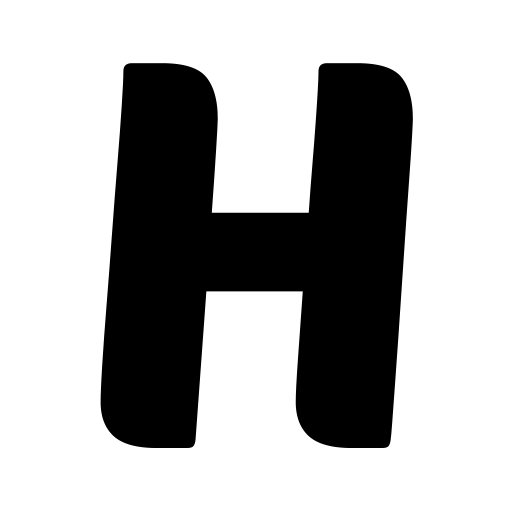
<style>
.page{position:relative;width:512px;height:512px;background:#ffffff}
.page>*{position:absolute;margin:0}
.t1{font:541.7px "PoetsenOne-Regular";color:#000000}
</style>
<div class="page">
<p class="t1" style="left:100px;top:63px;width:313px;height:385px">H</p>
</div>
